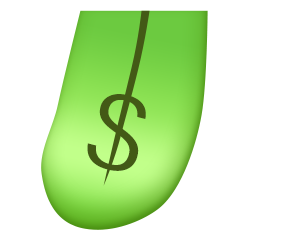
<style>
.page{position:relative;width:284px;height:242px;background:#ffffff}
.page>*{position:absolute;margin:0}
.t1{font:110px "AcuminConcept-CondensedLight";letter-spacing:0.025em;color:#435916;text-transform:uppercase;scale:1.3 1}
</style>
<div class="page">
<p class="t1" style="left:87px;top:94px;width:59px;height:77px;rotate:14deg">S</p>
</div>
